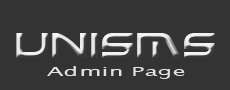
<style>
.page{position:relative;width:230px;height:90px;background:#333333}
.page>*{position:absolute;margin:0}
.t1{font:33.3px "Xirod"}
.t2{font:12.5px "LucidaSans";color:#dfe5e6;scale:1.93 1}
</style>
<div class="page">
<p class="t1" style="left:16px;top:33px;width:199px;height:25px">UNISMS</p>
<p class="t2" style="left:47px;top:66px;width:138px;height:13px">Admin Page</p>
</div>
